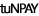
<style>
.page{position:relative;width:39px;height:16px;background:#ffffff}
.page>*{position:absolute;margin:0}
.t1{font:13px "MalgunGothicRegular";letter-spacing:-0.1em;color:#000000;font-weight:bold}
</style>
<div class="page">
<p class="t1" style="left:0px;top:3px;width:39px;height:11px">tuNPAY</p>
</div>
